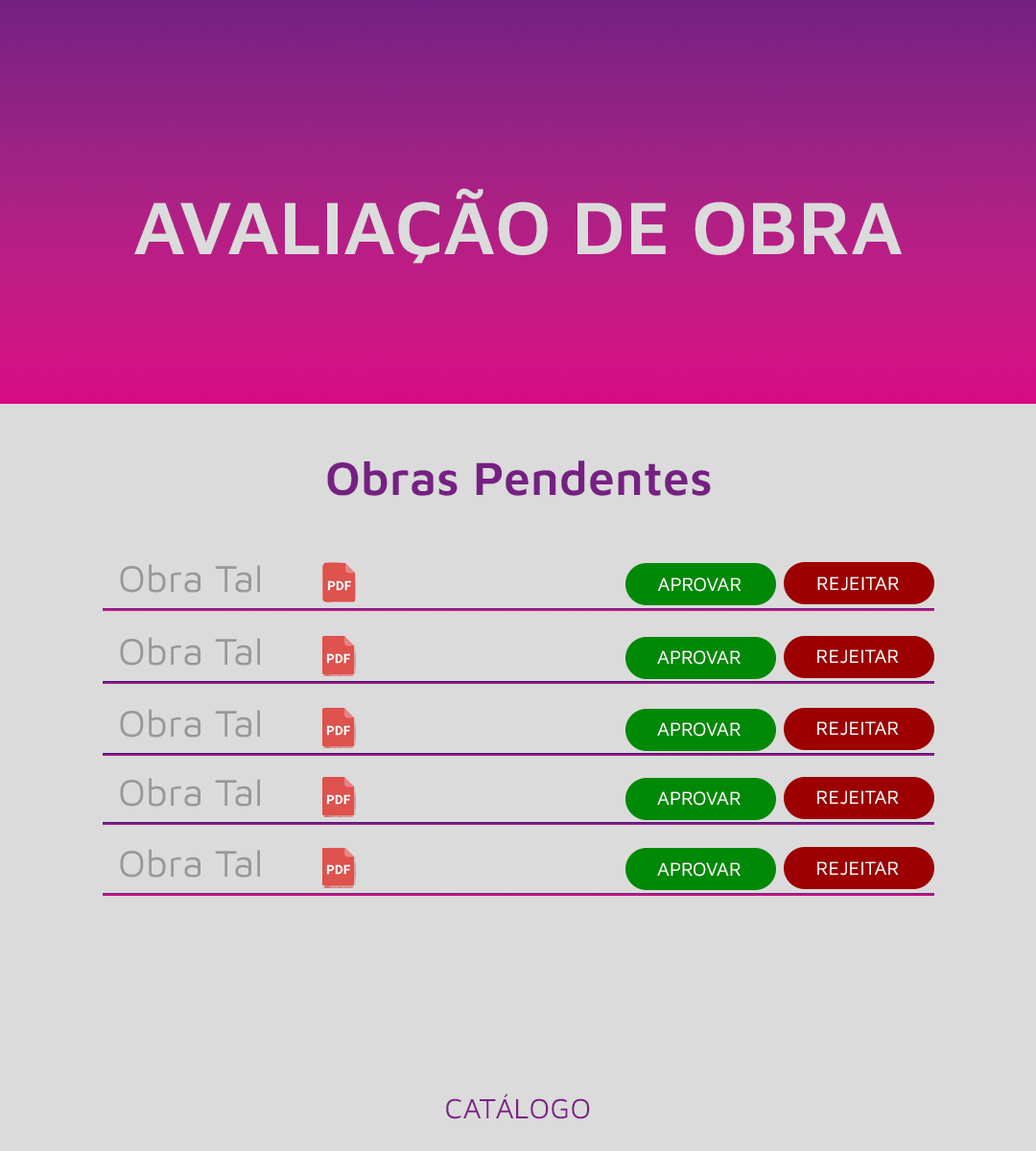
<style>
.page{position:relative;width:1036px;height:1151px;background:#dbdbdb}
.page>*{position:absolute;margin:0}
.t1{font:76.7px "MavenPro-SemiBold";color:#dbdbdb}
.t2{font:48px "MavenPro-SemiBold";color:#762083}
.t3{font:38.4px "MavenPro-Regular";color:#999797}
.t4{font:19.2px "MavenPro-Regular";color:#ffffff}
.t5{font:28.8px "MavenPro-Regular";color:#7a2083}
</style>
<div class="page">
<p class="t1" style="left:134px;top:188px;width:768px;height:76px">AVALIAÇÃO DE OBRA</p>
<p class="t2" style="left:327px;top:460px;width:384px;height:36px">Obras Pendentes</p>
<p class="t3" style="left:120px;top:564px;width:140px;height:29px">Obra Tal</p>
<p class="t4" style="left:658px;top:577px;width:83px;height:15px">APROVAR</p>
<p class="t4" style="left:817px;top:576px;width:82px;height:15px">REJEITAR</p>
<p class="t3" style="left:120px;top:637px;width:140px;height:29px">Obra Tal</p>
<p class="t4" style="left:657px;top:650px;width:84px;height:15px">APROVAR</p>
<p class="t4" style="left:817px;top:649px;width:82px;height:15px">REJEITAR</p>
<p class="t3" style="left:120px;top:709px;width:140px;height:29px">Obra Tal</p>
<p class="t4" style="left:657px;top:722px;width:84px;height:15px">APROVAR</p>
<p class="t4" style="left:817px;top:721px;width:82px;height:15px">REJEITAR</p>
<p class="t3" style="left:120px;top:778px;width:140px;height:29px">Obra Tal</p>
<p class="t4" style="left:657px;top:791px;width:84px;height:15px">APROVAR</p>
<p class="t4" style="left:817px;top:790px;width:82px;height:15px">REJEITAR</p>
<p class="t3" style="left:120px;top:849px;width:140px;height:29px">Obra Tal</p>
<p class="t4" style="left:657px;top:862px;width:84px;height:15px">APROVAR</p>
<p class="t4" style="left:817px;top:861px;width:82px;height:15px">REJEITAR</p>
<p class="t5" style="left:446px;top:1094px;width:144px;height:25px">CATÁLOGO</p>
</div>
